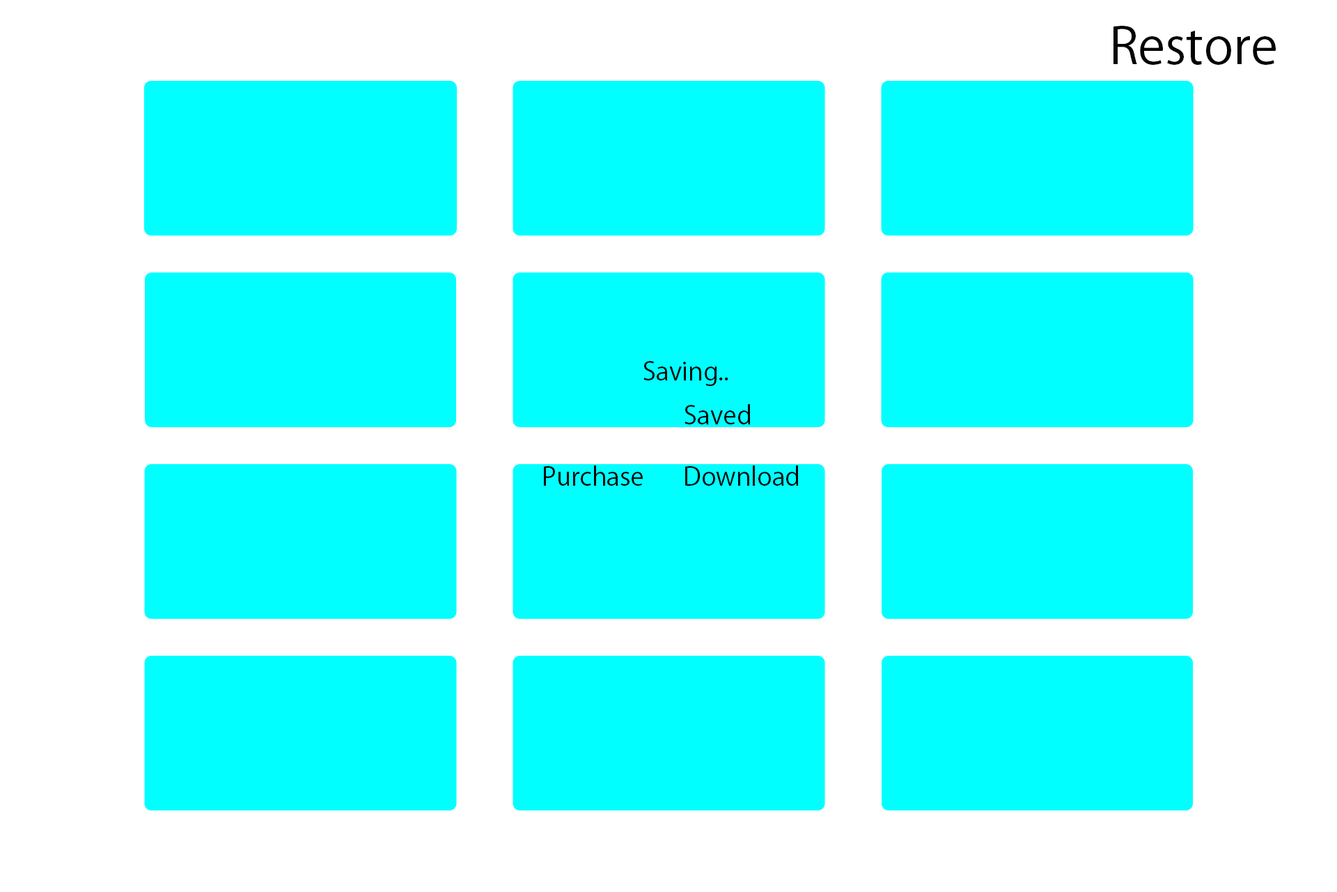
<style>
.page{position:relative;width:1337px;height:892px;background:#ffffff}
.page>*{position:absolute;margin:0}
.t1{font:50.2px "KozGoPr6N-Regular";color:#040404}
.t2{font:25.1px "KozGoPr6N-Regular";color:#040404}
</style>
<div class="page">
<p class="t1" style="left:1114px;top:26px;width:162px;height:39px">Restore</p>
<p class="t2" style="left:644px;top:361px;width:85px;height:25px">Saving..</p>
<p class="t2" style="left:685px;top:404px;width:66px;height:20px">Saved</p>
<p class="t2" style="left:544px;top:465px;width:99px;height:21px">Purchase</p>
<p class="t2" style="left:685px;top:465px;width:114px;height:21px">Download</p>
</div>
